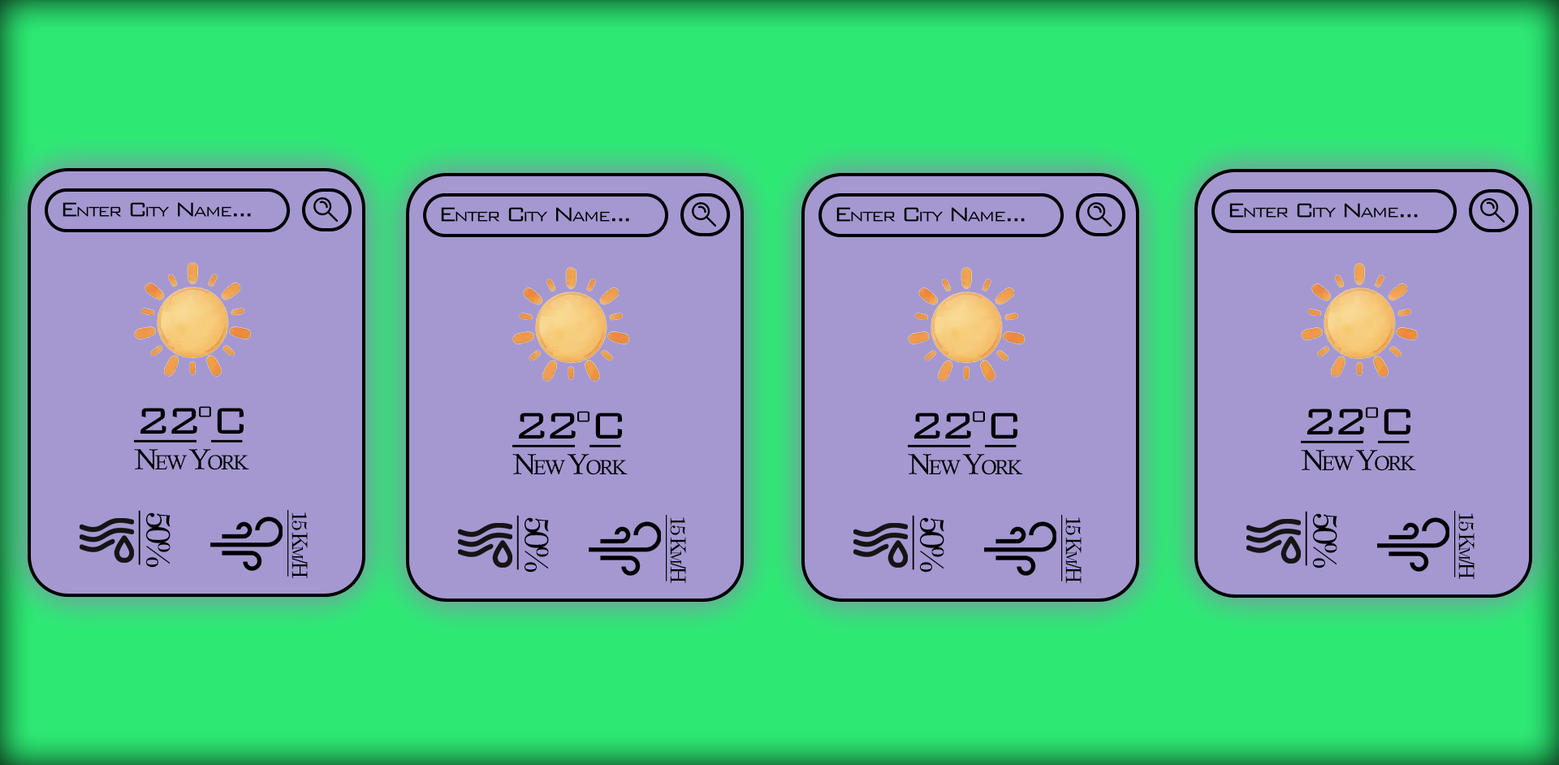
<style>
.page{position:relative;width:1559px;height:765px;background:#a598d1}
.page>*{position:absolute;margin:0}
.t1{font:26.8px "BankGothicBT-Light";letter-spacing:-0.12em;color:#000000;font-variant:small-caps}
.t2{font:49.5px "BankGothicBT-Light";letter-spacing:-0.12em;color:#000000;font-variant:small-caps;text-decoration:underline}
.t3{font:49.5px "BankGothicBT-Light";letter-spacing:-0.12em;color:#000000;font-variant:small-caps}
.t4{font:29.2px "CalistoMT";letter-spacing:-0.12em;color:#000000;font-variant:small-caps}
.t5{font:34.1px "CenturySchoolbook";letter-spacing:-0.12em;color:#000000;font-variant:small-caps;text-decoration:underline}
.t6{font:21.1px "CenturySchoolbook";letter-spacing:-0.12em;color:#000000;font-variant:small-caps;text-decoration:underline}
</style>
<div class="page">
<p class="t1" style="left:63px;top:202px;width:188px;height:15px">Enter City Name...</p>
<p class="t1" style="left:441px;top:207px;width:188px;height:15px">Enter City Name...</p>
<p class="t1" style="left:836px;top:207px;width:189px;height:15px">Enter City Name...</p>
<p class="t1" style="left:1229px;top:203px;width:189px;height:15px">Enter City Name...</p>
<p class="t2" style="left:134px;top:406px;width:110px;height:37px">22<span class="t3">o</span>C</p>
<p class="t2" style="left:512px;top:411px;width:110px;height:36px">22<span class="t3">o</span>C</p>
<p class="t2" style="left:908px;top:411px;width:109px;height:36px">22<span class="t3">o</span>C</p>
<p class="t2" style="left:1301px;top:407px;width:109px;height:36px">22<span class="t3">o</span>C</p>
<p class="t4" style="left:134px;top:449px;width:115px;height:21px">New York</p>
<p class="t4" style="left:1301px;top:450px;width:115px;height:21px">New York</p>
<p class="t4" style="left:512px;top:454px;width:116px;height:21px">New York</p>
<p class="t4" style="left:908px;top:454px;width:115px;height:21px">New York</p>
<p class="t5" style="left:138px;top:510px;width:33px;height:58px;rotate:90deg">50%</p>
<p class="t6" style="left:287px;top:510px;width:21px;height:68px;rotate:90deg">15 Km/H</p>
<p class="t5" style="left:516px;top:515px;width:33px;height:57px;rotate:90deg">50%</p>
<p class="t6" style="left:666px;top:515px;width:20px;height:68px;rotate:90deg">15 Km/H</p>
<p class="t5" style="left:912px;top:515px;width:32px;height:57px;rotate:90deg">50%</p>
<p class="t6" style="left:1061px;top:515px;width:21px;height:68px;rotate:90deg">15 Km/H</p>
<p class="t5" style="left:1305px;top:511px;width:32px;height:57px;rotate:90deg">50%</p>
<p class="t6" style="left:1454px;top:511px;width:21px;height:68px;rotate:90deg">15 Km/H</p>
</div>
